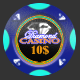
<style>
.page{position:relative;width:80px;height:80px;background:#333333}
.page>*{position:absolute;margin:0}
.t1{font:10.8px/3.6px "EdwardianScriptITC";color:#fda047}
.t2{font:6.3px/5.4px "Castellar";color:#fda047;scale:1.5 1}
.t3{font:10.6px "BernardMT-Condensed";color:#e19012;scale:1.22 1}
</style>
<div class="page">
<p class="t1" style="left:19px;top:30px;width:41px;height:14px;text-align:justify">Diamond<br><span class="t2">CASINO</span></p>
<p class="t3" style="left:31px;top:45px;width:18px;height:10px">10$</p>
</div>
